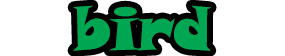
<style>
.page{position:relative;width:285px;height:56px;background:#ffffff}
.page>*{position:absolute;margin:0}
.t1{font:60px "SnapITC-Regular";color:#00a651}
</style>
<div class="page">
<p class="t1" style="left:73px;top:5px;width:138px;height:46px">bird</p>
</div>
